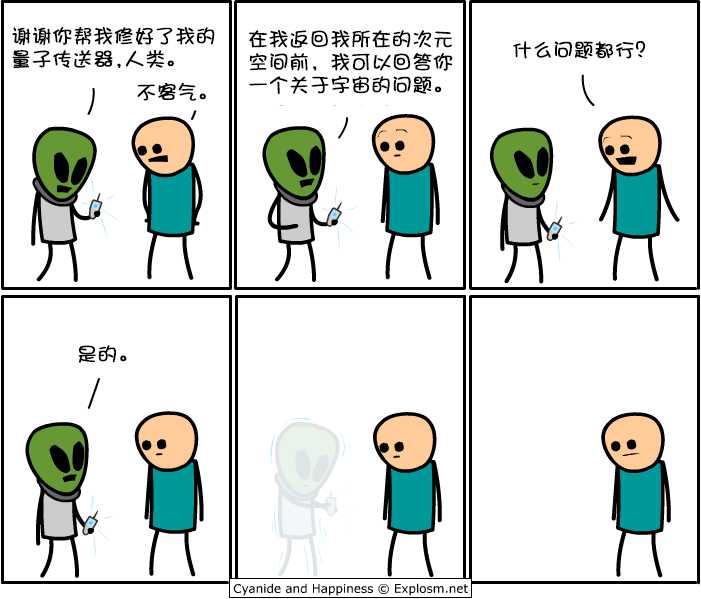
<style>
.page{position:relative;width:701px;height:599px;background:#ffffff}
.page>*{position:absolute;margin:0}
.t1{font:20px/23px "DFShaoNvW5";color:#000000;font-weight:bold}
.t2{font:20px "DFShaoNvW5";color:#000000;font-weight:bold}
</style>
<div class="page">
<p class="t1" style="left:12px;top:27px;width:203px;height:41px">谢谢你帮我修好了我的<br>量子传送器,人类。</p>
<p class="t1" style="left:249px;top:30px;width:204px;height:64px">在我返回我所在的次元<br>空间前，我可以回答你<br>一个关于宇宙的问题。</p>
<p class="t2" style="left:513px;top:41px;width:133px;height:18px">什么问题都行？</p>
<p class="t2" style="left:137px;top:82px;width:69px;height:19px">不客气。</p>
<p class="t2" style="left:78px;top:345px;width:49px;height:18px">是的。</p>
</div>
